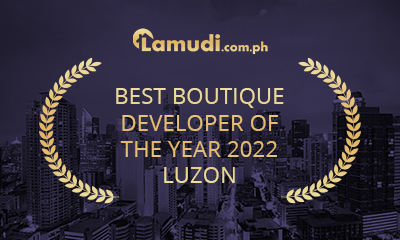
<style>
.page{position:relative;width:400px;height:240px}
.page>*{position:absolute;margin:0}
.t1{font:22px "OpenSans";letter-spacing:0.01em;text-transform:uppercase}
</style>
<div class="page">
<p class="t1" style="left:116px;top:88px;width:168px;height:95px;text-align:center">Best Boutique<br>Developer of<br>the Year 2022<br>Luzon</p>
</div>
